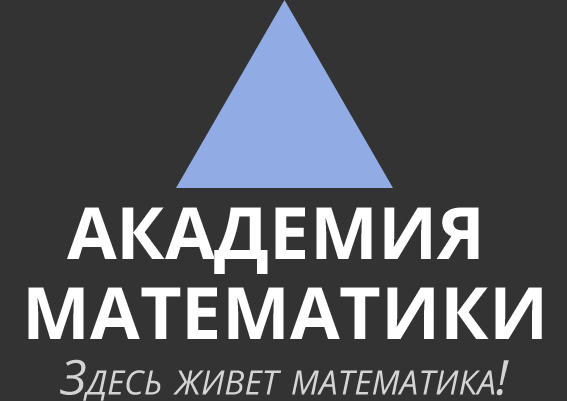
<style>
.page{position:relative;width:567px;height:401px;background:#333333}
.page>*{position:absolute;margin:0}
.t1{font:72px/80px "OpenSans-Bold";color:#ffffff;text-transform:uppercase}
.t2{font:48px "OpenSans-Italic";color:#d4d4d4;font-variant:small-caps}
</style>
<div class="page">
<p class="t1" style="left:28px;top:207px;width:514px;height:132px;text-align:center">Академия <br>математики</p>
<p class="t2" style="left:60px;top:359px;width:449px;height:42px">Здесь живет математика!</p>
</div>
